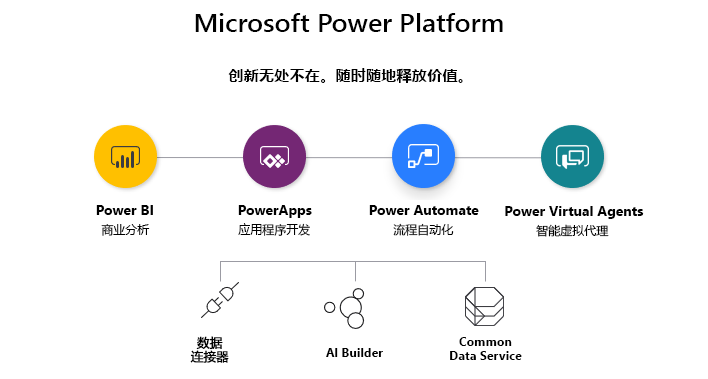
<style>
.page{position:relative;width:708px;height:379px;background:#ffffff}
.page>*{position:absolute;margin:0}
.t1{font:25.5px "SegoeUI-Semibold";color:#000000;scale:1.05 1}
.t2{font:15.3px "MicrosoftYaHei-Bold";color:#000000}
.t3{font:14px "SegoeUI-Bold";color:#000000}
.t4{font:12px "MicrosoftYaHei";color:#000000}
.t5{font:12.4px/14.7px "MicrosoftYaHei";color:#000000;font-weight:bold}
.t6{font:12.4px/14.7px "SegoeUI-Bold";color:#000000}
.t7{font:12.4px "SegoeUI-Bold";color:#000000}
</style>
<div class="page">
<p class="t1" style="left:195px;top:13px;width:308px;height:19px">Microsoft Power Platform</p>
<p class="t2" style="left:228px;top:68px;width:235px;height:15px">创新无处不在。随时随地释放价值。</p>
<p class="t3" style="left:96px;top:205px;width:57px;height:10px">Power BI</p>
<p class="t3" style="left:238px;top:205px;width:74px;height:13px">PowerApps</p>
<p class="t3" style="left:369px;top:205px;width:110px;height:10px">Power Automate</p>
<p class="t3" style="left:505px;top:206px;width:139px;height:13px">Power Virtual Agents</p>
<p class="t4" style="left:101px;top:224px;width:49px;height:12px">商业分析</p>
<p class="t4" style="left:238px;top:223px;width:72px;height:13px">应用程序开发</p>
<p class="t4" style="left:393px;top:223px;width:61px;height:13px">流程自动化</p>
<p class="t4" style="left:536px;top:224px;width:73px;height:13px">智能虚拟代理</p>
<p class="t5" style="left:190px;top:336px;width:39px;height:27px;text-align:center">数据<br>连接器</p>
<p class="t6" style="left:450px;top:337px;width:72px;height:23px;text-align:center">Common <br>Data Service</p>
<p class="t7" style="left:326px;top:348px;width:57px;height:9px">Al Builder</p>
</div>
